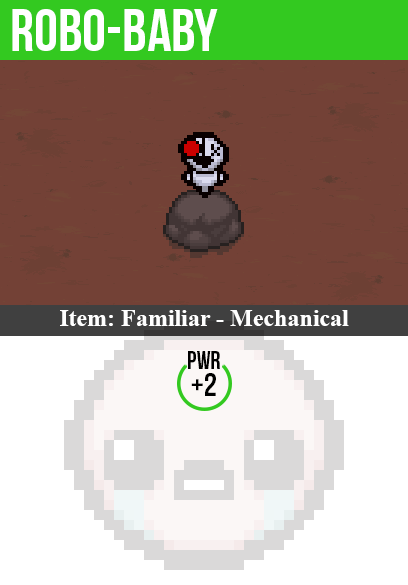
<style>
.page{position:relative;width:408px;height:585px;background:#734136}
.page>*{position:absolute;margin:0}
.t1{font:60px "BebasNeue";color:#ffffff}
.t2{font:24px "TimesNewRomanPS-BoldMT";color:#ffffff}
.t3{font:25px "BebasNeue";color:#000000}
.t4{font:32px "BebasNeue";color:#000000}
</style>
<div class="page">
<p class="t1" style="left:12px;top:9px;width:206px;height:42px">robo-baby</p>
<p class="t2" style="left:60px;top:310px;width:289px;height:16px">Item: Familiar - Mechanical</p>
<p class="t3" style="left:188px;top:351px;width:32px;height:18px">pwr</p>
<p class="t4" style="left:191px;top:373px;width:25px;height:23px">+2</p>
</div>
